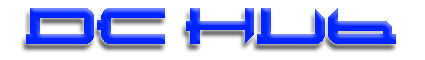
<style>
.page{position:relative;width:425px;height:60px;background:#ffffff}
.page>*{position:absolute;margin:0}
.t1{font:36px "Metatron";color:#0024ff}
</style>
<div class="page">
<p class="t1" style="left:26px;top:8px;width:370px;height:36px">DC HUb</p>
</div>
